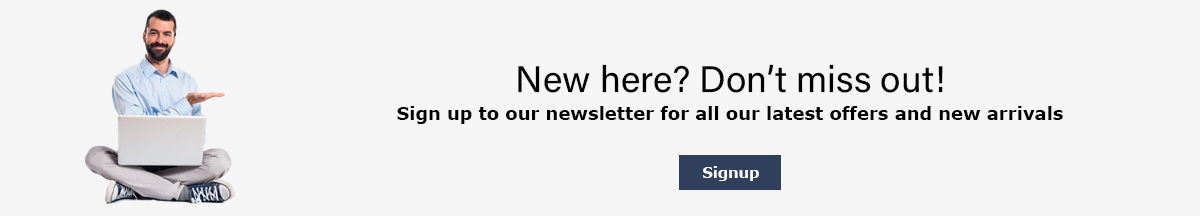
<style>
.page{position:relative;width:1200px;height:216px;background:#f5f5f5}
.page>*{position:absolute;margin:0}
.t1{font:36.9px "AcuminConcept-Regular";color:#000000}
.t2{font:18px "Verdana-Bold";color:#000000}
.t3{font:14.7px "Verdana-Bold";color:#ffffff}
</style>
<div class="page">
<p class="t1" style="left:518px;top:64px;width:425px;height:29px">New here? Don’t miss out!</p>
<p class="t2" style="left:397px;top:106px;width:666px;height:18px">Sign up to our newsletter for all our latest offers and new arrivals</p>
<p class="t3" style="left:703px;top:166px;width:56px;height:15px">Signup</p>
</div>
